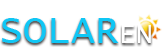
<style>
.page{position:relative;width:168px;height:52px;background:#ffffff}
.page>*{position:absolute;margin:0}
.t1{font:40px "LucidaConsole";color:#10c7f5}
.t2{font:28px "LucidaConsole";color:#ffffff}
</style>
<div class="page">
<p class="t1" style="left:2px;top:18px;width:117px;height:25px">SOLAR</p>
<p class="t2" style="left:122px;top:25px;width:29px;height:18px">EN</p>
</div>
